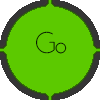
<style>
.page{position:relative;width:100px;height:100px;background:#5cc900}
.page>*{position:absolute;margin:0}
.t1{font:25px "SkarpaLT"}
</style>
<div class="page">
<p class="t1" style="left:36px;top:31px;width:31px;height:23px">Go</p>
</div>
